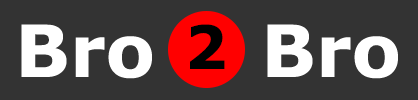
<style>
.page{position:relative;width:418px;height:100px;background:#333333}
.page>*{position:absolute;margin:0}
.t1{font:72px "Verdana-Bold";color:#ffffff}
.t2{font:60px "Verdana-Bold";color:#000000}
</style>
<div class="page">
<p class="t1" style="left:21px;top:24px;width:131px;height:55px">Bro</p>
<p class="t2" style="left:190px;top:24px;width:35px;height:45px">2</p>
<p class="t1" style="left:267px;top:24px;width:131px;height:55px">Bro</p>
</div>
